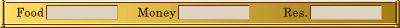
<style>
.page{position:relative;width:400px;height:28px;background:#dfd3c0}
.page>*{position:absolute;margin:0}
.t1{font:12px "CenturySchoolbook";letter-spacing:0.025em;color:#321a02}
</style>
<div class="page">
<p class="t1" style="left:16px;top:7px;width:28px;height:10px">Food</p>
<p class="t1" style="left:137px;top:7px;width:39px;height:12px">Money</p>
<p class="t1" style="left:283px;top:7px;width:24px;height:10px">Res.</p>
</div>
